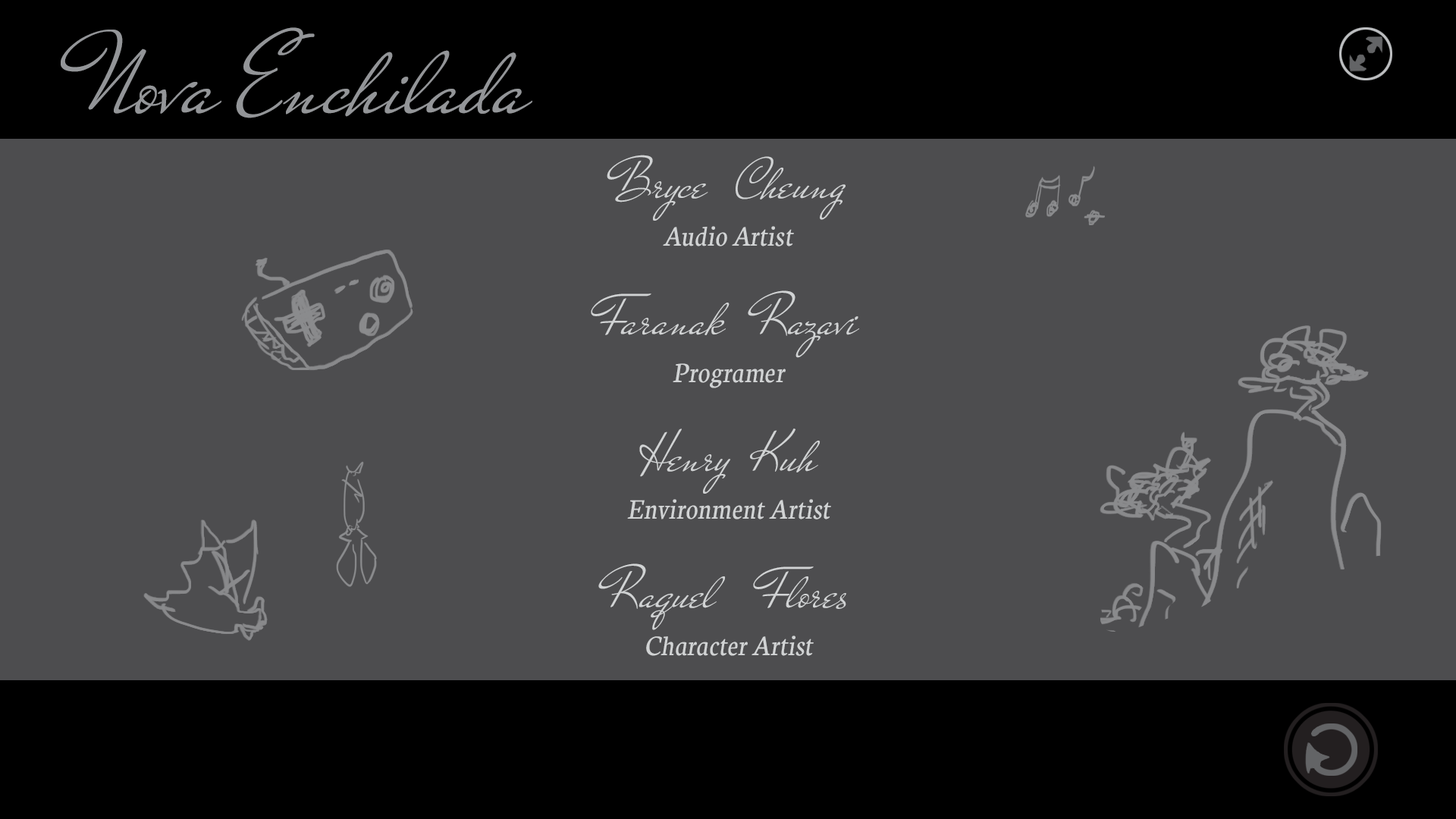
<style>
.page{position:relative;width:1456px;height:819px;background:#4d4d4f}
.page>*{position:absolute;margin:0}
.t1{font:113.7px "MrDeHaviland-Regular";color:#939598}
.t2{font:30.3px/34.1px "Neuton-Italic";color:#d1d3d4}
.t3{font:56.9px/68.2px "MrDeHaviland-Regular";color:#d1d3d4}
.t4{font:30.3px/68.2px "Neuton-Italic";color:#d1d3d4}
</style>
<div class="page">
<p class="t1" style="left:61px;top:27px;width:471px;height:91px">Nova Enchilada</p>
<p class="t2" style="left:591px;top:155px;width:268px;height:501px;text-align:center"><span class="t3">Bryce   Cheung<br></span><span class="t4">Audio Artist<br></span><span class="t3">Faranak   Razavi<br></span><span class="t4">Programer<br></span><span class="t3">Henry  Kuh<br></span>Environment Artist<br><br><span class="t3">Raquel    Flores<br></span>Character Artist</p>
</div>
